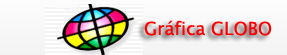
<style>
.page{position:relative;width:287px;height:55px}
.page>*{position:absolute;margin:0}
.t1{font:18px "LucidaSansUnicode";color:#ff0000}
</style>
<div class="page">
<p class="t1" style="left:144px;top:20px;width:128px;height:16px">Gráfica GLOBO</p>
</div>
